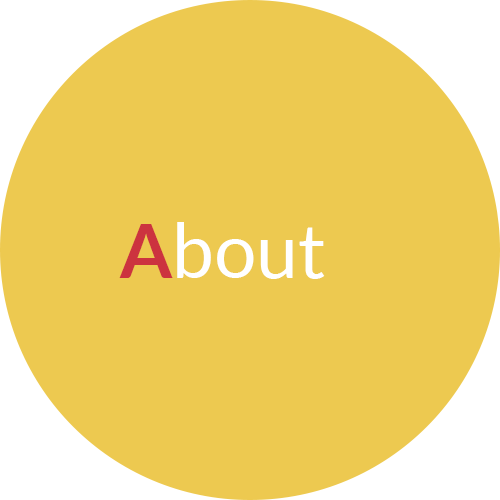
<style>
.page{position:relative;width:500px;height:500px;background:#edc950}
.page>*{position:absolute;margin:0}
.t1{font:75px "Lato-Regular";color:#ffffff}
.t2{font:75px "Lato-Bold";color:#cc333f}
</style>
<div class="page">
<p class="t1" style="left:119px;top:222px;width:206px;height:57px"><span class="t2">A</span>bout</p>
</div>
